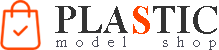
<style>
.page{position:relative;width:219px;height:50px;background:#ffffff}
.page>*{position:absolute;margin:0}
.t1{font:59.9px "AngsanaNew-Bold";color:#333333;scale:0.96 1}
.t2{font:59.9px "AngsanaNew-Bold";color:#ff4400;scale:0.96 1}
.t3{font:24px "AngsanaNew";color:#4a4c58}
</style>
<div class="page">
<p class="t1" style="left:55px;top:6px;width:162px;height:28px">PLA<span class="t2">S</span>TIC</p>
<p class="t3" style="left:56px;top:36px;width:160px;height:14px">m  o  d  e  l         s  h  o  p</p>
</div>
